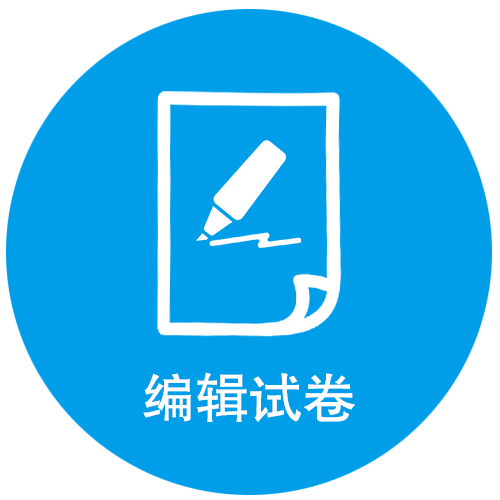
<style>
.page{position:relative;width:500px;height:500px;background:#009ee8}
.page>*{position:absolute;margin:0}
.t1{font:53.7px "FZHTJW--GB1-0";color:#ffffff}
</style>
<div class="page">
<p class="t1" style="left:143px;top:372px;width:212px;height:50px">编辑试卷</p>
</div>
